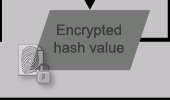
<style>
.page{position:relative;width:170px;height:100px;background:#c6c3c6}
.page>*{position:absolute;margin:0}
.t1{font:14.7px "ArialMT";color:#3b3c3b}
</style>
<div class="page">
<p class="t1" style="left:54px;top:24px;width:70px;height:29px;text-align:center">Encrypted<br>hash value</p>
</div>
